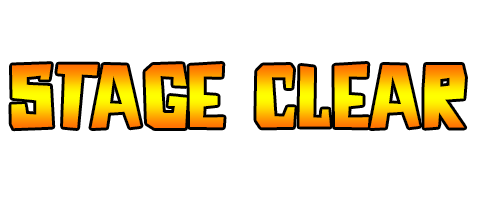
<style>
.page{position:relative;width:480px;height:200px;background:#ffffff}
.page>*{position:absolute;margin:0}
.t1{font:80px "DKAstromonkey"}
</style>
<div class="page">
<p class="t1" style="left:11px;top:64px;width:454px;height:65px">STAGE CLEAR</p>
</div>
